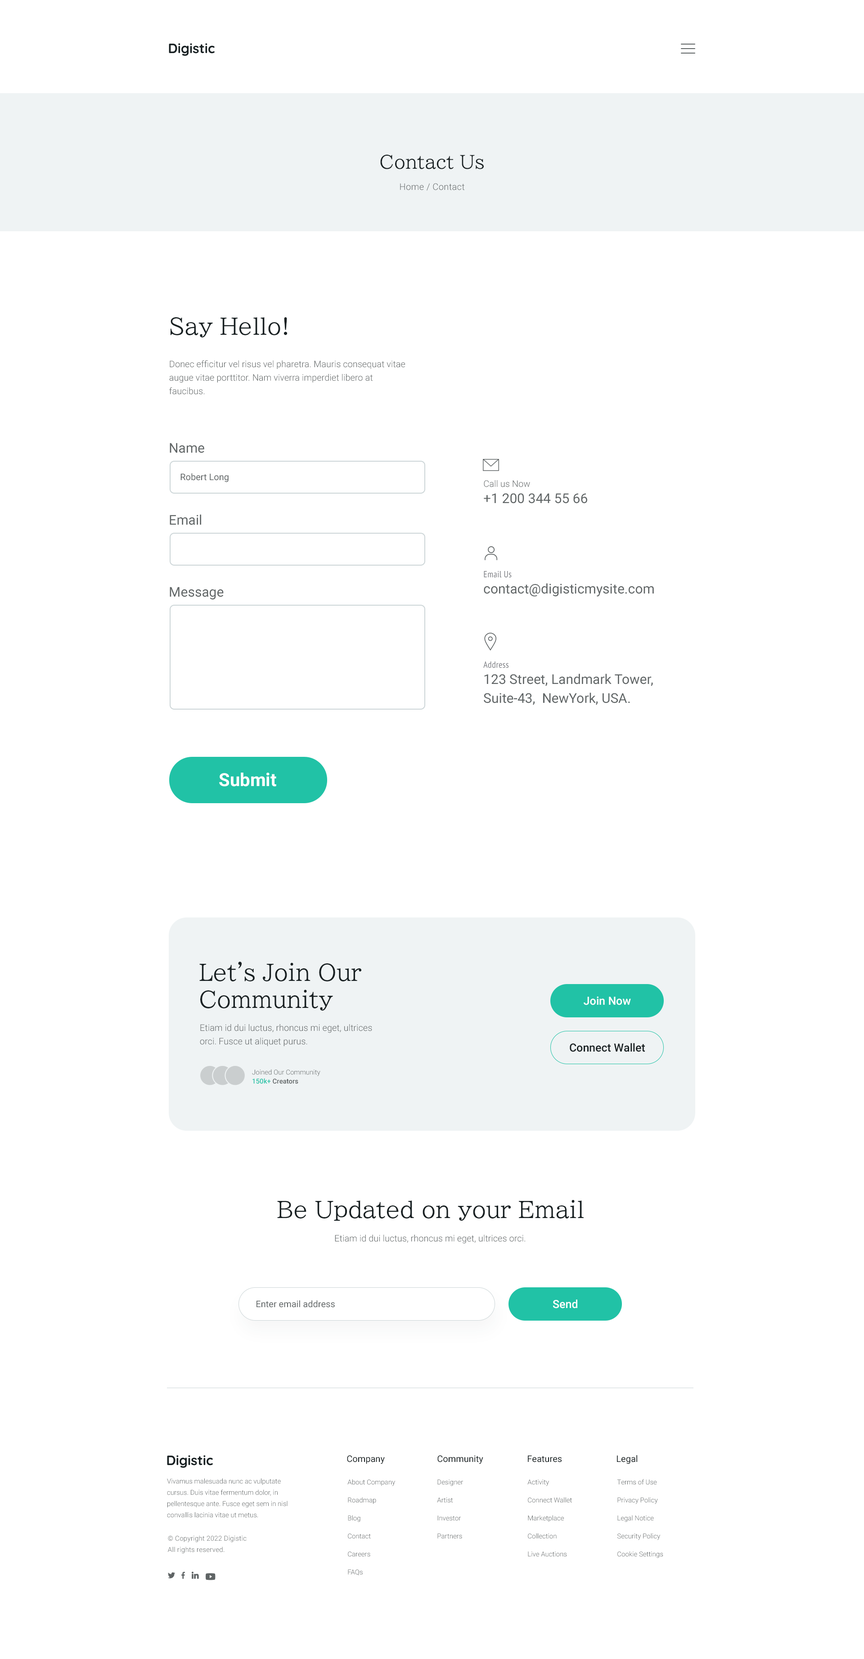
<style>
.page{position:relative;width:864px;height:1659px;background:#ffffff}
.page>*{position:absolute;margin:0}
.t1{font:18px "BIZUDPMincho-Regular";color:#182022}
.t2{font:9px "Roboto-Light";letter-spacing:0.02em;color:#5f6465}
.t3{font:22.5px "BIZUDPMincho-Regular";color:#182022}
.t4{font:9px/13.5px "Roboto-Light";color:#5f6465}
.t5{font:13.5px "Roboto-Regular";color:#5f6465}
.t6{font:9px "Roboto-Regular";color:#5f6465}
.t7{font:9px "Roboto-Light";color:#5f6465}
.t8{font:9px "PTSans-Narrow";letter-spacing:0.02em;color:#7c7e83}
.t9{font:13.5px/18.9px "Roboto-Regular";color:#5f6465}
.t10{font:18px "Roboto-Bold";color:#ffffff}
.t11{font:22.5px/27px "BIZUDPMincho-Regular";color:#182022}
.t12{font:22.5px/27px "BIZUDPMincho-Regular";letter-spacing:-0.2em;color:#182022}
.t13{font:11.2px "Roboto-Medium";color:#ffffff}
.t14{font:11.2px "Roboto-Medium";color:#182022}
.t15{font:6.8px/9px "Roboto-Light";color:#5f6465}
.t16{font:6.8px/9px "Roboto-Medium";color:#21c2a6}
.t17{font:6.8px/9px "Roboto-Medium";color:#5f6465}
.t18{font:9px "Roboto-Regular";color:#182022}
.t19{font:6.8px/11.2px "Roboto-Light";color:#5f6465}
.t20{font:6.8px/18px "Roboto-Light";color:#5f6465}
.t21{font:6.8px/11.2px "Roboto-Light";letter-spacing:0.02em;color:#5f6465}
</style>
<div class="page">
<p class="t1" style="left:380px;top:154px;width:104px;height:15px">Contact Us</p>
<p class="t2" style="left:400px;top:183px;width:64px;height:8px">Home / Contact</p>
<p class="t3" style="left:171px;top:317px;width:116px;height:21px">Say Hello!</p>
<p class="t4" style="left:169px;top:360px;width:236px;height:35px">Donec efficitur vel risus vel pharetra. Mauris consequat vitae augue vitae porttitor. Nam viverra imperdiet libero at faucibus.</p>
<p class="t5" style="left:170px;top:443px;width:34px;height:10px">Name</p>
<p class="t6" style="left:180px;top:473px;width:49px;height:9px">Robert Long</p>
<p class="t7" style="left:484px;top:480px;width:46px;height:7px">Call us Now</p>
<p class="t5" style="left:484px;top:493px;width:103px;height:11px">+1 200 344 55 66</p>
<p class="t5" style="left:170px;top:514px;width:31px;height:11px">Email</p>
<p class="t8" style="left:484px;top:571px;width:28px;height:7px">Email Us</p>
<p class="t5" style="left:170px;top:587px;width:54px;height:13px">Message</p>
<p class="t5" style="left:484px;top:583px;width:170px;height:14px">contact@digisticmysite.com</p>
<p class="t8" style="left:483px;top:661px;width:25px;height:7px">Address</p>
<p class="t9" style="left:484px;top:674px;width:169px;height:31px">123 Street, Landmark Tower,<br>Suite-43,  NewYork, USA.</p>
<p class="t10" style="left:219px;top:773px;width:57px;height:14px">Submit</p>
<p class="t11" style="left:199px;top:962px;width:162px;height:49px">Let<span class="t12">’</span>s Join Our<br>Community</p>
<p class="t13" style="left:584px;top:996px;width:47px;height:9px">Join Now</p>
<p class="t4" style="left:200px;top:1024px;width:172px;height:22px">Etiam id dui luctus, rhoncus mi eget, ultrices orci. Fusce ut aliquet purus.</p>
<p class="t14" style="left:570px;top:1043px;width:75px;height:9px">Connect Wallet</p>
<p class="t15" style="left:252px;top:1069px;width:68px;height:15px">Joined Our Community<br><span class="t16">150k+</span><span class="t17"> Creators</span></p>
<p class="t3" style="left:277px;top:1200px;width:307px;height:21px">Be Updated on your Email</p>
<p class="t7" style="left:335px;top:1235px;width:190px;height:9px">Etiam id dui luctus, rhoncus mi eget, ultrices orci.</p>
<p class="t6" style="left:256px;top:1300px;width:79px;height:8px">Enter email address</p>
<p class="t13" style="left:553px;top:1300px;width:24px;height:9px">Send</p>
<p class="t18" style="left:347px;top:1455px;width:38px;height:9px">Company</p>
<p class="t18" style="left:437px;top:1455px;width:46px;height:9px">Community</p>
<p class="t18" style="left:528px;top:1455px;width:34px;height:7px">Features</p>
<p class="t18" style="left:617px;top:1455px;width:20px;height:9px">Legal</p>
<p class="t19" style="left:167px;top:1478px;width:121px;height:40px">Vivamus malesuada nunc ac vulputate cursus. Duis vitae fermentum dolor, in pellentesque ante. Fusce eget sem in nisl convallis lacinia vitae ut metus.</p>
<p class="t20" style="left:347px;top:1479px;width:48px;height:96px">About Company<br>Roadmap<br>Blog<br>Contact<br>Careers<br>FAQs</p>
<p class="t20" style="left:437px;top:1480px;width:26px;height:59px">Designer<br>Artist<br>Investor<br>Partners</p>
<p class="t20" style="left:527px;top:1480px;width:45px;height:77px">Activity<br>Connect Wallet<br>Marketplace<br>Collection<br>Live Auctions</p>
<p class="t20" style="left:617px;top:1479px;width:46px;height:79px">Terms of Use<br>Privacy Policy<br>Legal Notice<br>Security Policy<br>Cookie Settings</p>
<p class="t21" style="left:168px;top:1535px;width:79px;height:19px">© Copyright 2022 Digistic<br>All rights reserved.</p>
</div>
